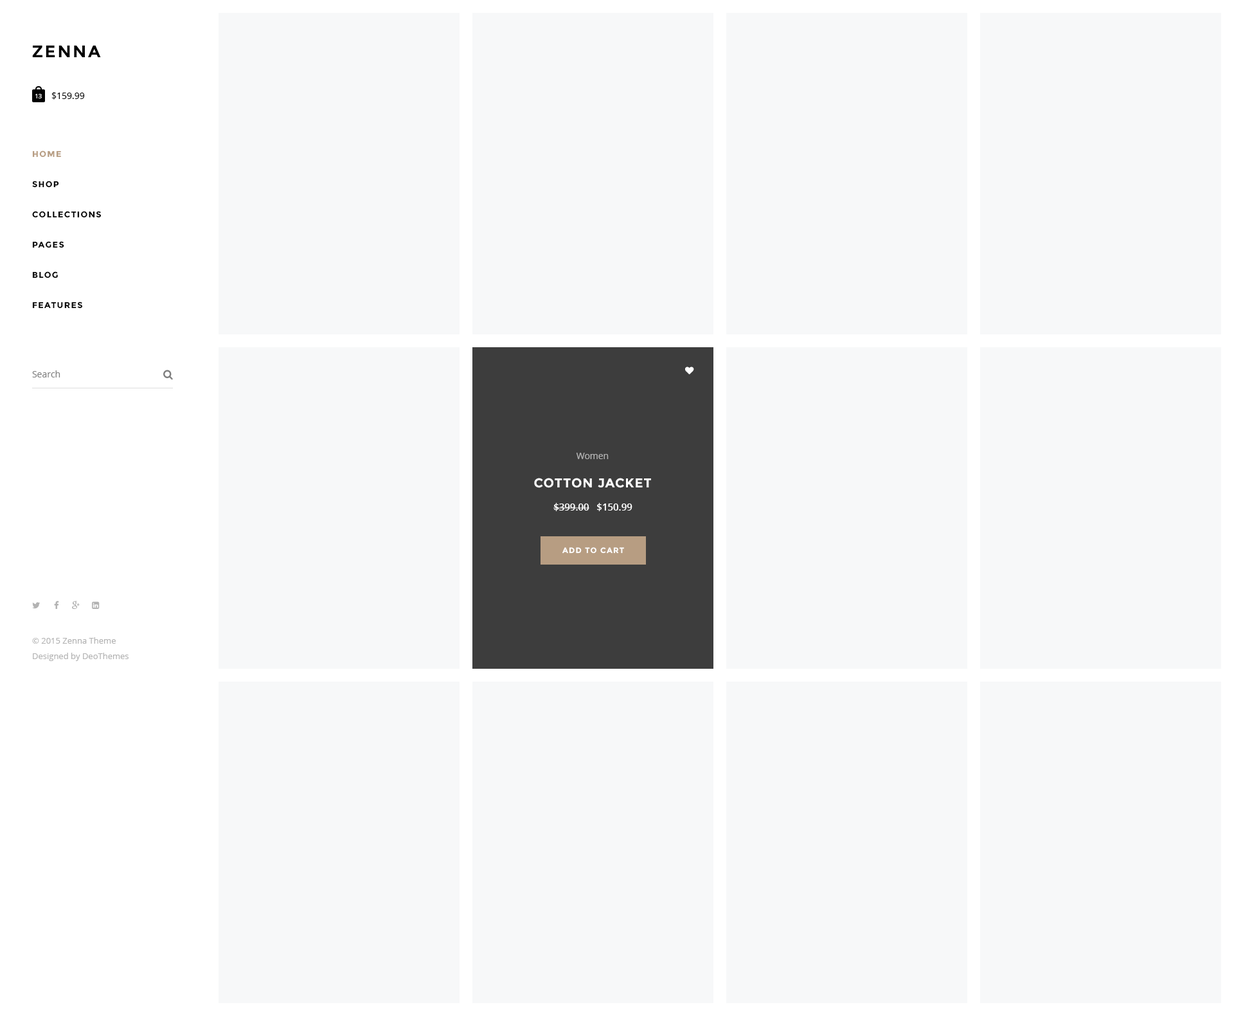
<style>
.page{position:relative;width:1234px;height:1016px;background:#f7f8f9}
.page>*{position:absolute;margin:0}
.t1{font:16.7px "Montserrat-Bold";letter-spacing:0.1em;color:#000000;text-transform:uppercase}
.t2{font:6.4px "OpenSans";color:#ffffff;text-transform:uppercase}
.t3{font:9px "OpenSans";color:#000000}
.t4{font:8.4px/30.2px "Montserrat-Bold";letter-spacing:0.1em;color:#000000;text-transform:uppercase}
.t5{font:8.4px/30.2px "Montserrat-Bold";letter-spacing:0.1em;color:#b79d82;text-transform:uppercase}
.t6{font:9px "OpenSans";color:#7f7f7f}
.t7{font:9px "OpenSans";color:#b2b2b2}
.t8{font:12.9px "Montserrat-Bold";letter-spacing:0.05em;color:#ffffff;text-transform:uppercase}
.t9{font:9.6px "OpenSans-Semibold";color:#ffffff}
.t10{font:7.7px "Montserrat-Bold";letter-spacing:0.1em;color:#ffffff;text-transform:uppercase}
.t11{font:8.4px/15.4px "OpenSans";color:#b2b2b2}
</style>
<div class="page">
<p class="t1" style="left:32px;top:45px;width:69px;height:12px">zenna</p>
<p class="t2" style="left:35px;top:94px;width:7px;height:4px">13</p>
<p class="t3" style="left:51px;top:92px;width:34px;height:8px">$159.99</p>
<p class="t4" style="left:32px;top:150px;width:70px;height:159px"><span class="t5">Home<br></span>Shop<br>Collections<br>Pages<br>Blog<br>Features</p>
<p class="t6" style="left:32px;top:370px;width:28px;height:7px">Search</p>
<p class="t7" style="left:576px;top:453px;width:33px;height:6px">Women</p>
<p class="t8" style="left:534px;top:478px;width:117px;height:10px">Cotton jacket</p>
<p class="t9" style="left:554px;top:503px;width:79px;height:8px">$399.00   $150.99</p>
<p class="t10" style="left:562px;top:547px;width:62px;height:7px">add to cart</p>
<p class="t11" style="left:32px;top:637px;width:97px;height:24px">© 2015 Zenna Theme<br>Designed by DeoThemes</p>
</div>
